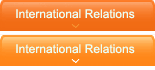
<style>
.page{position:relative;width:155px;height:70px}
.page>*{position:absolute;margin:0}
.t1{font:12px "ArialMT";color:#ebfff6}
</style>
<div class="page">
<p class="t1" style="left:16px;top:9px;width:119px;height:10px">International Relations</p>
<p class="t1" style="left:16px;top:44px;width:119px;height:10px">International Relations</p>
</div>
